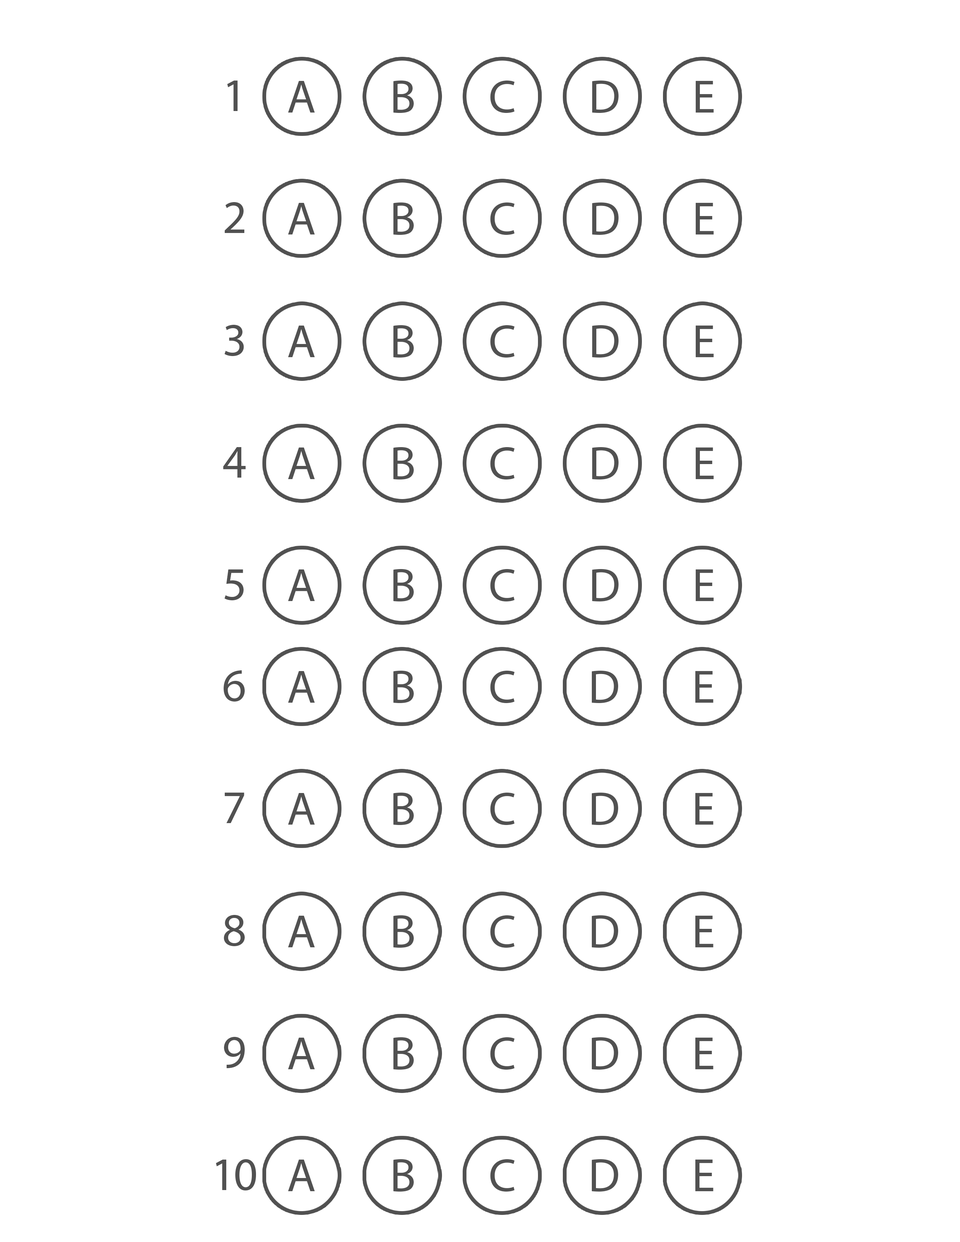
<style>
.page{position:relative;width:960px;height:1242px;background:#ffffff}
.page>*{position:absolute;margin:0}
.t1{font:47.2px "MyriadPro-Regular";letter-spacing:-0.04em;color:#515151}
</style>
<div class="page">
<p class="t1" style="left:227px;top:81px;width:11px;height:30px">1</p>
<p class="t1" style="left:288px;top:81px;width:27px;height:32px">A</p>
<p class="t1" style="left:393px;top:80px;width:21px;height:33px">B</p>
<p class="t1" style="left:490px;top:80px;width:25px;height:33px">C</p>
<p class="t1" style="left:592px;top:80px;width:26px;height:33px">D</p>
<p class="t1" style="left:696px;top:81px;width:18px;height:32px">E</p>
<p class="t1" style="left:224px;top:202px;width:20px;height:31px">2</p>
<p class="t1" style="left:288px;top:203px;width:27px;height:32px">A</p>
<p class="t1" style="left:393px;top:202px;width:21px;height:33px">B</p>
<p class="t1" style="left:490px;top:202px;width:25px;height:33px">C</p>
<p class="t1" style="left:592px;top:202px;width:26px;height:33px">D</p>
<p class="t1" style="left:696px;top:203px;width:18px;height:32px">E</p>
<p class="t1" style="left:224px;top:324px;width:20px;height:32px">3</p>
<p class="t1" style="left:288px;top:326px;width:27px;height:31px">A</p>
<p class="t1" style="left:393px;top:325px;width:21px;height:33px">B</p>
<p class="t1" style="left:490px;top:325px;width:25px;height:33px">C</p>
<p class="t1" style="left:592px;top:325px;width:26px;height:33px">D</p>
<p class="t1" style="left:696px;top:325px;width:18px;height:33px">E</p>
<p class="t1" style="left:223px;top:447px;width:23px;height:31px">4</p>
<p class="t1" style="left:288px;top:448px;width:27px;height:31px">A</p>
<p class="t1" style="left:393px;top:447px;width:21px;height:33px">B</p>
<p class="t1" style="left:490px;top:447px;width:25px;height:33px">C</p>
<p class="t1" style="left:592px;top:447px;width:26px;height:33px">D</p>
<p class="t1" style="left:696px;top:447px;width:18px;height:33px">E</p>
<p class="t1" style="left:224px;top:570px;width:20px;height:31px">5</p>
<p class="t1" style="left:288px;top:570px;width:27px;height:31px">A</p>
<p class="t1" style="left:393px;top:569px;width:21px;height:33px">B</p>
<p class="t1" style="left:490px;top:569px;width:25px;height:33px">C</p>
<p class="t1" style="left:592px;top:569px;width:26px;height:33px">D</p>
<p class="t1" style="left:696px;top:569px;width:18px;height:33px">E</p>
<p class="t1" style="left:224px;top:670px;width:21px;height:32px">6</p>
<p class="t1" style="left:288px;top:671px;width:27px;height:32px">A</p>
<p class="t1" style="left:393px;top:670px;width:21px;height:34px">B</p>
<p class="t1" style="left:490px;top:670px;width:25px;height:34px">C</p>
<p class="t1" style="left:592px;top:670px;width:26px;height:33px">D</p>
<p class="t1" style="left:695px;top:671px;width:18px;height:32px">E</p>
<p class="t1" style="left:225px;top:792px;width:19px;height:31px">7</p>
<p class="t1" style="left:288px;top:793px;width:27px;height:32px">A</p>
<p class="t1" style="left:393px;top:792px;width:21px;height:34px">B</p>
<p class="t1" style="left:490px;top:792px;width:25px;height:34px">C</p>
<p class="t1" style="left:592px;top:792px;width:26px;height:33px">D</p>
<p class="t1" style="left:695px;top:793px;width:18px;height:32px">E</p>
<p class="t1" style="left:224px;top:915px;width:21px;height:31px">8</p>
<p class="t1" style="left:288px;top:916px;width:27px;height:31px">A</p>
<p class="t1" style="left:393px;top:915px;width:21px;height:33px">B</p>
<p class="t1" style="left:490px;top:915px;width:25px;height:33px">C</p>
<p class="t1" style="left:592px;top:915px;width:26px;height:33px">D</p>
<p class="t1" style="left:695px;top:915px;width:18px;height:33px">E</p>
<p class="t1" style="left:224px;top:1037px;width:21px;height:32px">9</p>
<p class="t1" style="left:288px;top:1038px;width:27px;height:31px">A</p>
<p class="t1" style="left:393px;top:1037px;width:21px;height:33px">B</p>
<p class="t1" style="left:490px;top:1037px;width:25px;height:33px">C</p>
<p class="t1" style="left:592px;top:1037px;width:26px;height:33px">D</p>
<p class="t1" style="left:695px;top:1037px;width:18px;height:33px">E</p>
<p class="t1" style="left:288px;top:1160px;width:27px;height:31px">A</p>
<p class="t1" style="left:393px;top:1159px;width:21px;height:33px">B</p>
<p class="t1" style="left:490px;top:1159px;width:25px;height:33px">C</p>
<p class="t1" style="left:592px;top:1159px;width:26px;height:33px">D</p>
<p class="t1" style="left:695px;top:1159px;width:18px;height:33px">E</p>
</div>
